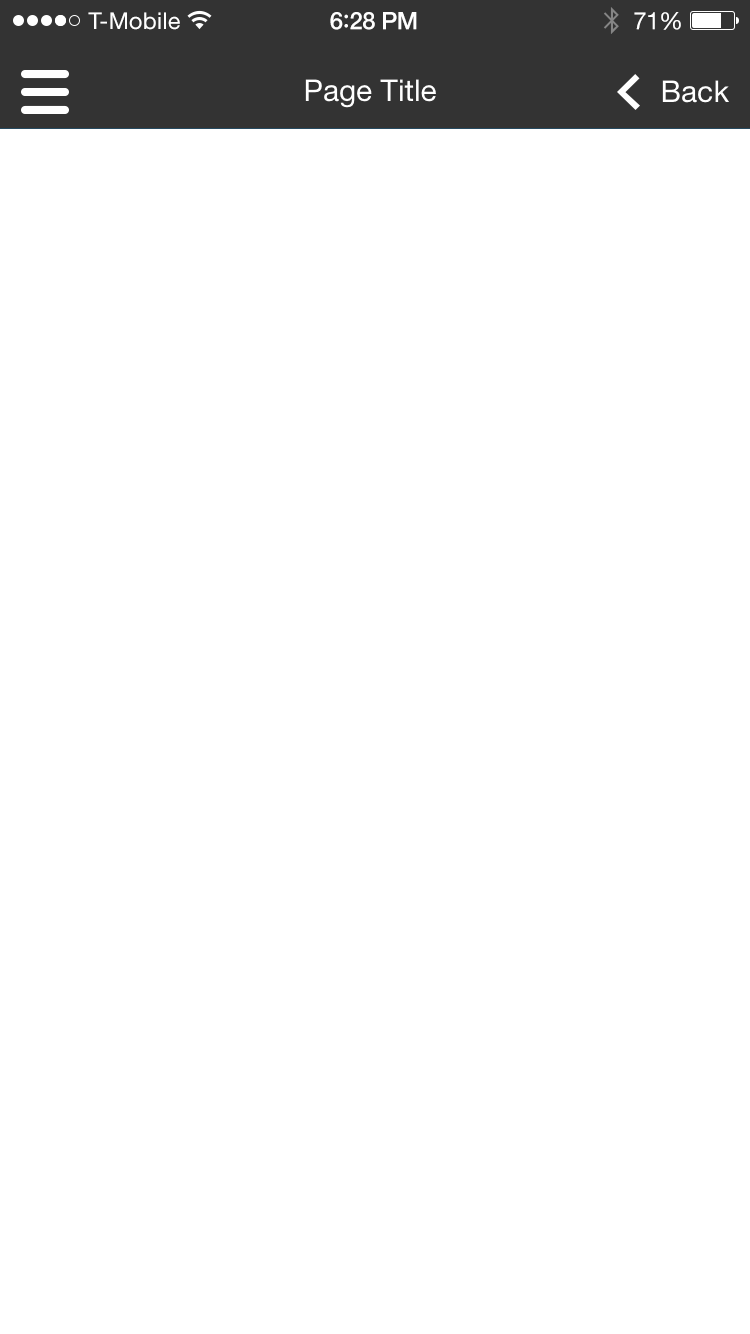
<style>
.page{position:relative;width:750px;height:1334px;background:#ffffff}
.page>*{position:absolute;margin:0}
.t1{font:23px "HelveticaNeue";letter-spacing:0.02em;color:#ffffff}
.t2{font:24px "HelveticaNeue-Medium";letter-spacing:-0.02em;color:#ffffff}
.t3{font:26px "Avenir-Medium";letter-spacing:-0.02em;color:#ffffff}
.t4{font:24px "HelveticaNeue";letter-spacing:-0.02em;color:#ffffff}
.t5{font:30px "HelveticaNeue";color:#ffffff}
</style>
<div class="page">
<p class="t1" style="left:88px;top:12px;width:92px;height:18px">T-Mobile</p>
<p class="t2" style="left:330px;top:12px;width:87px;height:18px">6<span class="t3">:</span>28 PM</p>
<p class="t4" style="left:634px;top:12px;width:47px;height:18px">71%</p>
<p class="t5" style="left:305px;top:79px;width:131px;height:29px">Page Title</p>
<p class="t5" style="left:662px;top:80px;width:67px;height:23px">Back</p>
</div>
